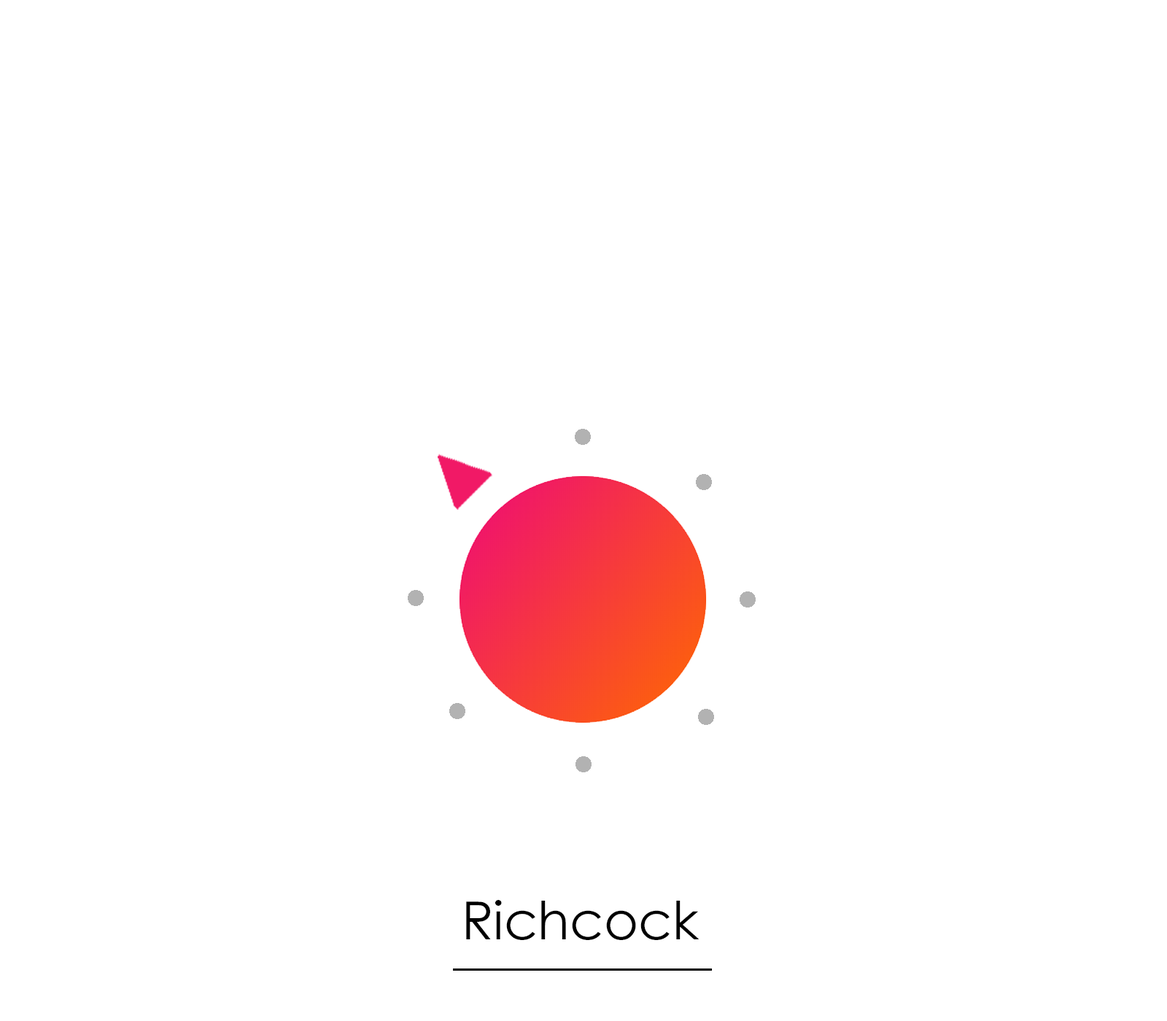
<style>
.page{position:relative;width:1167px;height:1021px;background:#ffffff}
.page>*{position:absolute;margin:0}
.t1{font:52.5px "CenturyGothic";color:#000000}
</style>
<div class="page">
<p class="t1" style="left:466px;top:900px;width:234px;height:40px">Richcock</p>
</div>
